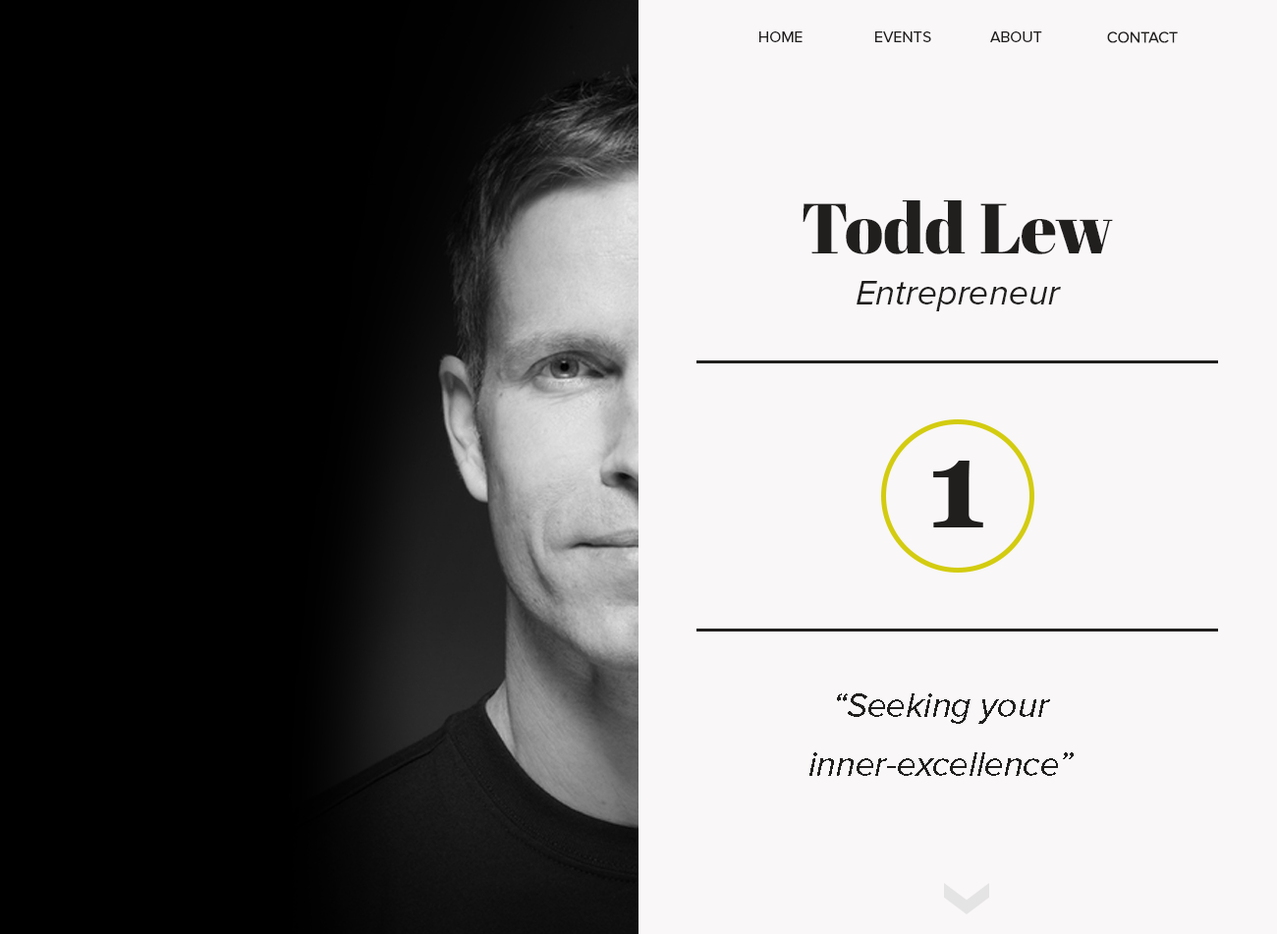
<style>
.page{position:relative;width:1277px;height:934px;background:#f9f7f7}
.page>*{position:absolute;margin:0}
.t1{font:15.7px "ProximaNova-Regular";color:#211e1e}
.t2{font:70.7px "AbrilFatface-Regular";color:#211e1e}
.t3{font:35.4px "ProximaNova-RegularIt";color:#211e1e}
.t4{font:35.4px/59.3px "ProximaNova-RegularIt";color:#211e1e}
</style>
<div class="page">
<p class="t1" style="left:759px;top:31px;width:43px;height:11px">HOME</p>
<p class="t1" style="left:875px;top:31px;width:56px;height:11px">EVENTS</p>
<p class="t1" style="left:990px;top:31px;width:52px;height:11px">ABOUT</p>
<p class="t1" style="left:1107px;top:31px;width:71px;height:12px">CONTACT</p>
<p class="t2" style="left:802px;top:200px;width:311px;height:54px">Todd Lew</p>
<p class="t3" style="left:856px;top:281px;width:205px;height:30px">Entrepreneur</p>
<p class="t4" style="left:809px;top:693px;width:264px;height:83px;text-align:center">“Seeking your inner-excellence”</p>
</div>
